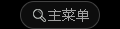
<style>
.page{position:relative;width:120px;height:29px;background:#0d0d0d}
.page>*{position:absolute;margin:0}
.t1{font:14px "FZLTCXHJW--GB1-0";color:#9f9f9f}
</style>
<div class="page">
<p class="t1" style="left:48px;top:8px;width:41px;height:14px">主菜单</p>
</div>
